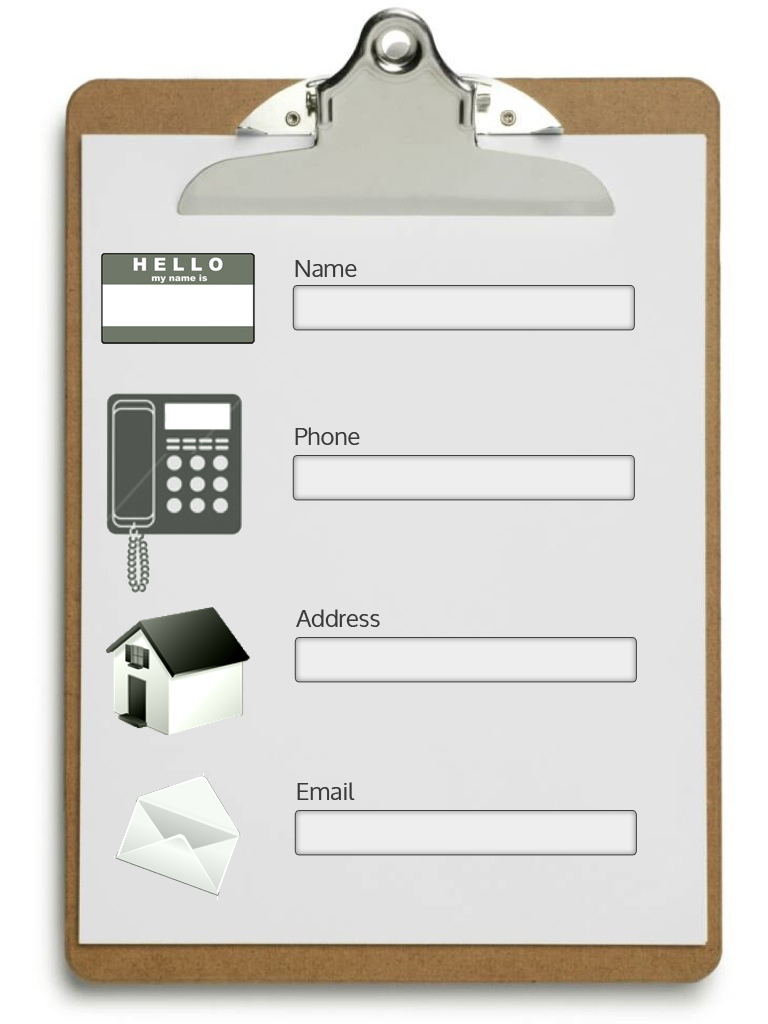
<style>
.page{position:relative;width:768px;height:1024px}
.page>*{position:absolute;margin:0}
.t1{font:24px "Oxygen";color:#3a3a3a}
</style>
<div class="page">
<p class="t1" style="left:295px;top:260px;width:62px;height:17px">Name</p>
<p class="t1" style="left:295px;top:427px;width:65px;height:18px">Phone</p>
<p class="t1" style="left:296px;top:609px;width:84px;height:18px">Address</p>
<p class="t1" style="left:297px;top:782px;width:58px;height:18px">Email</p>
</div>
